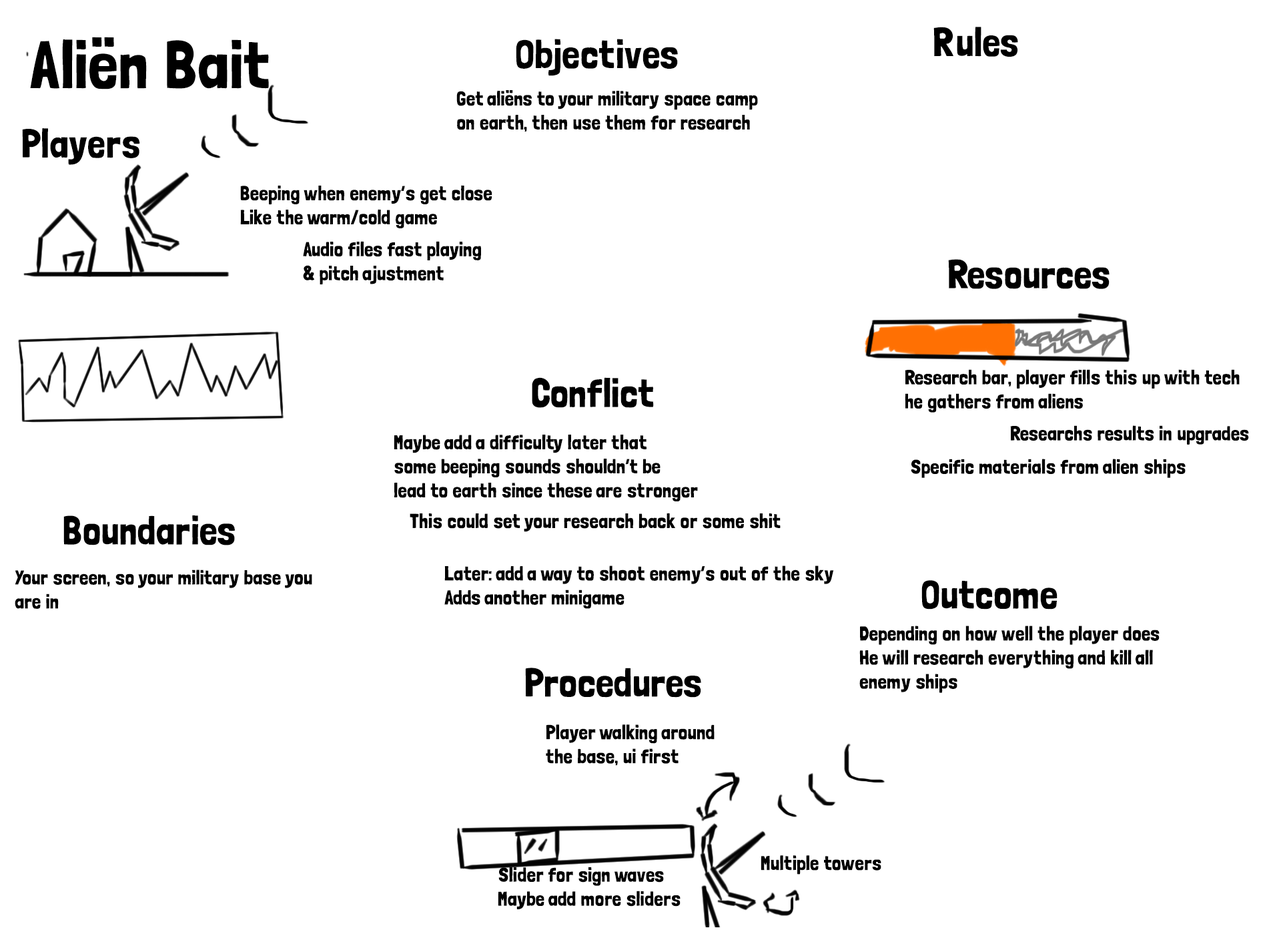
<style>
.page{position:relative;width:1261px;height:946px;background:#ffffff}
.page>*{position:absolute;margin:0}
.t1{font:40px "LondrinaSolid-Regular";color:#000000}
.t2{font:66.7px "LondrinaSolid-Regular";color:#000000}
.t3{font:20px "LondrinaSolid-Regular";color:#000000}
</style>
<div class="page">
<p class="t1" style="left:934px;top:27px;width:84px;height:30px">Rules</p>
<p class="t2" style="left:30px;top:37px;width:239px;height:52px">Aliën Bait</p>
<p class="t1" style="left:516px;top:39px;width:162px;height:37px">Objectives</p>
<p class="t3" style="left:456px;top:90px;width:302px;height:41px">Get aliëns to your military space camp<br>on earth, then use them for research</p>
<p class="t1" style="left:22px;top:128px;width:118px;height:37px">Players</p>
<p class="t3" style="left:240px;top:185px;width:252px;height:43px">Beeping when enemy’s get close<br>Like the warm/cold game</p>
<p class="t3" style="left:303px;top:241px;width:178px;height:43px">Audio files fast playing<br>&amp; pitch ajustment</p>
<p class="t1" style="left:948px;top:259px;width:162px;height:30px">Resources</p>
<p class="t1" style="left:532px;top:377px;width:122px;height:31px">Conflict</p>
<p class="t3" style="left:905px;top:369px;width:335px;height:43px">Research bar, player fills this up with tech<br>he gathers from aliens</p>
<p class="t3" style="left:1010px;top:425px;width:239px;height:19px">Researchs results in upgrades</p>
<p class="t3" style="left:394px;top:434px;width:304px;height:67px">Maybe add a difficulty later that<br>some beeping sounds shouldn’t be<br>lead to earth since these are stronger</p>
<p class="t3" style="left:911px;top:458px;width:275px;height:20px">Specific materials from alien ships</p>
<p class="t1" style="left:63px;top:515px;width:172px;height:30px">Boundaries</p>
<p class="t3" style="left:410px;top:512px;width:371px;height:20px">This could set your research back or some shit</p>
<p class="t3" style="left:15px;top:569px;width:297px;height:40px">Your screen, so your military base you<br>are in</p>
<p class="t3" style="left:444px;top:565px;width:390px;height:44px">Later: add a way to shoot enemy’s out of the sky<br>Adds another minigame</p>
<p class="t1" style="left:921px;top:580px;width:137px;height:29px">Outcome</p>
<p class="t3" style="left:859px;top:625px;width:301px;height:68px">Depending on how well the player does<br>He will research everything and kill all<br>enemy ships</p>
<p class="t1" style="left:525px;top:667px;width:176px;height:30px">Procedures</p>
<p class="t3" style="left:546px;top:724px;width:169px;height:41px">Player walking around<br>the base, ui first</p>
<p class="t3" style="left:761px;top:855px;width:120px;height:19px">Multiple towers</p>
<p class="t3" style="left:498px;top:866px;width:183px;height:43px">Slider for sign waves<br>Maybe add more sliders</p>
</div>
